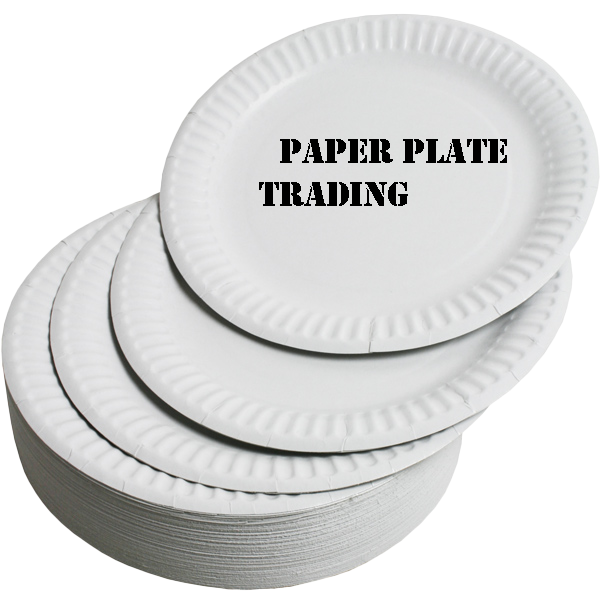
<style>
.page{position:relative;width:600px;height:600px;background:#ffffff}
.page>*{position:absolute;margin:0}
.t1{font:36px "Stencil";color:#000000}
</style>
<div class="page">
<p class="t1" style="left:259px;top:139px;width:248px;height:67px">Paper Plate <br>   Trading</p>
</div>
